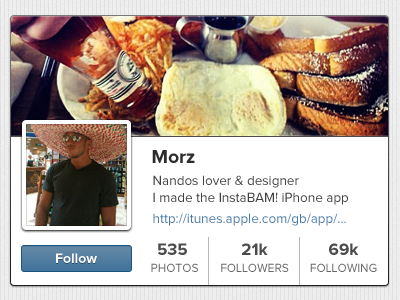
<style>
.page{position:relative;width:400px;height:300px;background:#ffffff}
.page>*{position:absolute;margin:0}
.t1{font:19.2px "ProximaNova-Bold";color:#2d2c2c}
.t2{font:13.5px/16.7px "ProximaNova-Regular";color:#414141}
.t3{font:13.5px/21.7px "ProximaNova-Regular";color:#497ba6}
.t4{font:12px/16.7px "ProximaNova-Regular";color:#686868}
.t5{font:17px/16.7px "ProximaNova-Bold";color:#4b4b4b}
.t6{font:14px "ProximaNova-Bold";color:#ffffff}
</style>
<div class="page">
<p class="t1" style="left:152px;top:150px;width:43px;height:13px">Morz</p>
<p class="t2" style="left:153px;top:175px;width:195px;height:51px">Nandos lover &amp; designer <br> I made the InstaBAM! iPhone app<br><span class="t3"> http://itunes.apple.com/gb/app/...</span></p>
<p class="t4" style="left:151px;top:243px;width:47px;height:29px;text-align:center"><span class="t5">535 <br></span>PHOTOS</p>
<p class="t4" style="left:221px;top:243px;width:68px;height:29px;text-align:center"><span class="t5">21k<br></span>FOLLOWERS</p>
<p class="t4" style="left:310px;top:243px;width:67px;height:29px;text-align:center"><span class="t5">69k<br></span>FOLLOWING</p>
<p class="t6" style="left:56px;top:253px;width:41px;height:10px">Follow</p>
</div>
